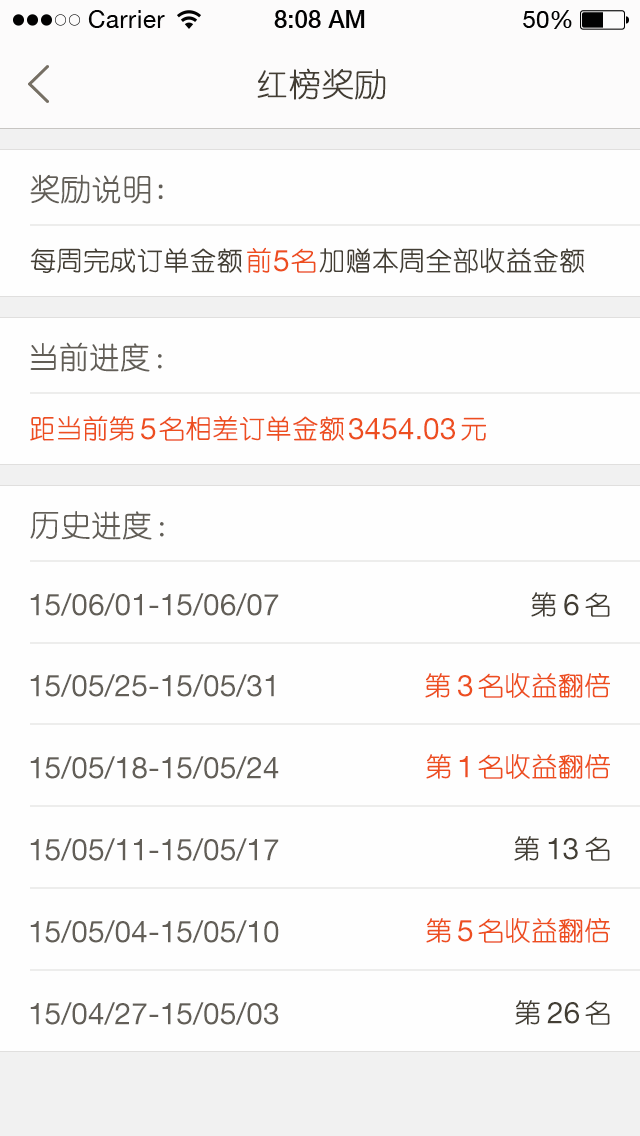
<style>
.page{position:relative;width:640px;height:1136px;background:#fefefe}
.page>*{position:absolute;margin:0}
.t1{font:32px "YouYuan";color:#433d33;text-transform:uppercase;font-weight:bold}
.t2{font:30px "YouYuan";color:#625e57;font-weight:bold}
.t3{font:26px "YouYuan";color:#433e34;font-weight:bold}
.t4{font:26px "YouYuan";color:#ed4e1f;text-transform:uppercase;font-weight:bold}
.t5{font:30px "HelveticaNeueLTPro-Roman";color:#ed4e1f;text-transform:uppercase}
.t6{font:30px "HelveticaNeueLTPro-Roman";color:#625e57;text-transform:uppercase}
.t7{font:26px "YouYuan";color:#433e34;text-transform:uppercase;font-weight:bold}
.t8{font:30px "HelveticaNeueLTPro-Roman";color:#433e34;text-transform:uppercase}
</style>
<div class="page">
<p class="t1" style="left:257px;top:68px;width:129px;height:32px">红榜奖励</p>
<p class="t2" style="left:30px;top:174px;width:133px;height:30px">奖励说明:</p>
<p class="t3" style="left:30px;top:247px;width:555px;height:27px">每周完成订单金额      加赠本周全部收益金额</p>
<p class="t4" style="left:247px;top:247px;width:24px;height:26px">前</p>
<p class="t5" style="left:274px;top:250px;width:15px;height:22px">5</p>
<p class="t4" style="left:291px;top:248px;width:25px;height:25px">名</p>
<p class="t2" style="left:30px;top:342px;width:132px;height:30px">当前进度：</p>
<p class="t4" style="left:30px;top:415px;width:104px;height:26px">距当前第</p>
<p class="t5" style="left:141px;top:418px;width:15px;height:22px">5</p>
<p class="t4" style="left:159px;top:416px;width:185px;height:25px">名相差订单金额</p>
<p class="t5" style="left:349px;top:418px;width:106px;height:22px">3454.03</p>
<p class="t4" style="left:461px;top:417px;width:25px;height:24px">元</p>
<p class="t2" style="left:30px;top:511px;width:134px;height:29px">历史进度：</p>
<p class="t6" style="left:30px;top:593px;width:249px;height:23px">15/06/01-15/06/07</p>
<p class="t7" style="left:531px;top:592px;width:25px;height:25px">第</p>
<p class="t7" style="left:585px;top:592px;width:25px;height:25px">名</p>
<p class="t8" style="left:564px;top:594px;width:15px;height:22px">6</p>
<p class="t6" style="left:30px;top:674px;width:244px;height:23px">15/05/25-15/05/31</p>
<p class="t4" style="left:425px;top:673px;width:25px;height:25px">第</p>
<p class="t5" style="left:458px;top:675px;width:15px;height:22px">3</p>
<p class="t4" style="left:478px;top:673px;width:132px;height:25px">名收益翻倍</p>
<p class="t6" style="left:30px;top:756px;width:249px;height:23px">15/05/18-15/05/24</p>
<p class="t4" style="left:426px;top:754px;width:25px;height:25px">第</p>
<p class="t5" style="left:459px;top:756px;width:9px;height:22px">1</p>
<p class="t4" style="left:478px;top:754px;width:132px;height:25px">名收益翻倍</p>
<p class="t6" style="left:30px;top:838px;width:249px;height:23px">15/05/11-15/05/17</p>
<p class="t7" style="left:514px;top:836px;width:25px;height:25px">第</p>
<p class="t8" style="left:548px;top:838px;width:30px;height:22px">13</p>
<p class="t7" style="left:585px;top:836px;width:25px;height:25px">名</p>
<p class="t4" style="left:426px;top:918px;width:25px;height:25px">第</p>
<p class="t4" style="left:478px;top:918px;width:132px;height:25px">名收益翻倍</p>
<p class="t6" style="left:30px;top:920px;width:249px;height:23px">15/05/04-15/05/10</p>
<p class="t5" style="left:458px;top:920px;width:15px;height:22px">5</p>
<p class="t7" style="left:515px;top:1000px;width:25px;height:25px">第</p>
<p class="t7" style="left:585px;top:1000px;width:25px;height:25px">名</p>
<p class="t6" style="left:30px;top:1002px;width:249px;height:23px">15/04/27-15/05/03</p>
<p class="t8" style="left:547px;top:1002px;width:32px;height:22px">26</p>
</div>
